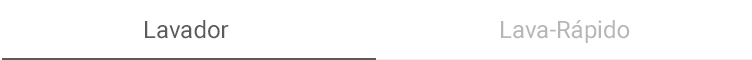
<style>
.page{position:relative;width:752px;height:60px;background:#ffffff}
.page>*{position:absolute;margin:0}
.t1{font:24px "Roboto-Regular";color:#5d5a58}
.t2{font:24px "Roboto-Regular";color:#b7b6b6}
</style>
<div class="page">
<p class="t1" style="left:145px;top:20px;width:84px;height:19px">Lavador</p>
<p class="t2" style="left:501px;top:20px;width:129px;height:23px">Lava-Rápido</p>
</div>
